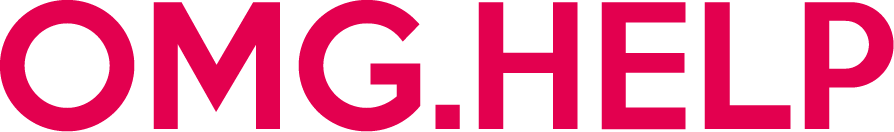
<style>
.page{position:relative;width:894px;height:132px;background:#ffffff}
.page>*{position:absolute;margin:0}
.t1{font:158.4px "KeepCalm-Medium";color:#e3004f}
</style>
<div class="page">
<p class="t1" style="left:0px;top:0px;width:894px;height:132px">OMG.HELP</p>
</div>
